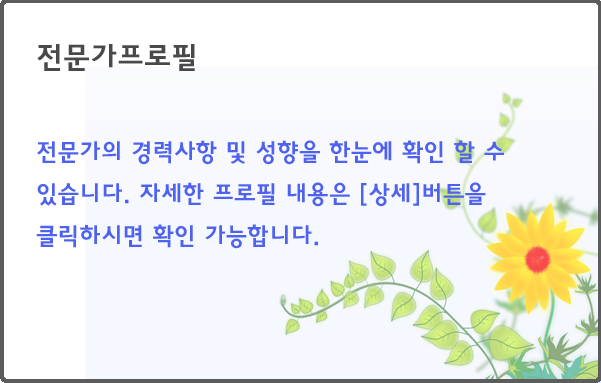
<style>
.page{position:relative;width:601px;height:383px;background:#ffffff}
.page>*{position:absolute;margin:0}
.t1{font:30px "HaanYGodic24";color:#494949}
.t2{font:24px "HaanYGodic24";color:#4f62ef}
</style>
<div class="page">
<p class="t1" style="left:37px;top:44px;width:158px;height:27px">전문가프로필</p>
<p class="t2" style="left:36px;top:140px;width:468px;height:109px">전문가의 경력사항 및 성향을 한눈에 확인 할 수 있습니다. 자세한 프로필 내용은 [상세]버튼을 클릭하시면 확인 가능합니다.</p>
</div>
